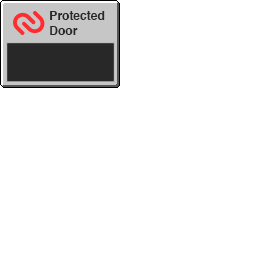
<style>
.page{position:relative;width:256px;height:256px;background:#ffffff}
.page>*{position:absolute;margin:0}
.t1{font:12px "Helvetica-Bold";color:#282828}
</style>
<div class="page">
<p class="t1" style="left:50px;top:11px;width:55px;height:24px">Protected<br>Door</p>
</div>
